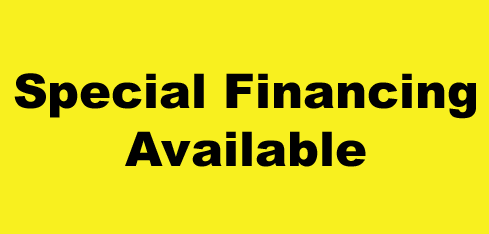
<style>
.page{position:relative;width:489px;height:234px;background:#f8f01f}
.page>*{position:absolute;margin:0}
.t1{font:48px "Arial-Black";color:#000000}
</style>
<div class="page">
<p class="t1" style="left:14px;top:73px;width:462px;height:94px;text-align:center">Special Financing<br>Available</p>
</div>
